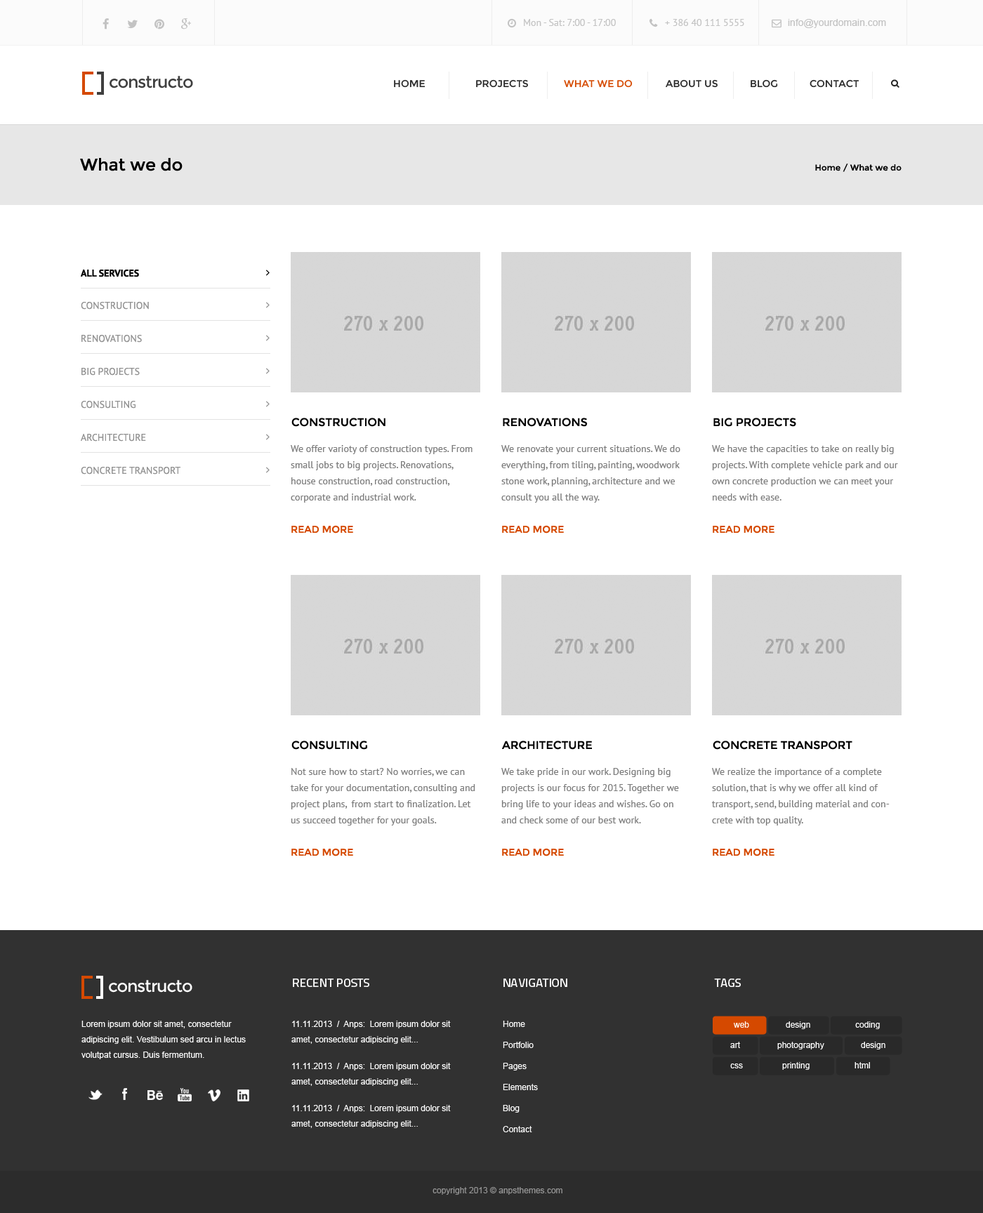
<style>
.page{position:relative;width:983px;height:1213px;background:#ffffff}
.page>*{position:absolute;margin:0}
.t1{font:9.8px "PTSans-Regular";color:#c3c3c3}
.t2{font:9.8px "ArialMT";color:#c3c3c3}
.t3{font:9.8px "Montserrat-Regular";color:#292929}
.t4{font:9.8px "Montserrat-Regular";color:#d54900}
.t5{font:16.8px "Montserrat-Regular";color:#000000}
.t6{font:8.4px "Montserrat-Regular";color:#000000}
.t7{font:9.8px "PTSans-Bold";color:#000000}
.t8{font:9.8px "PTSans-Regular";color:#919191}
.t9{font:11.2px "Montserrat-Regular";color:#000000}
.t10{font:9.8px/16.1px "PTSans-Regular";color:#7c7c7c}
.t11{font:11.9px "TitilliumText22L-Medium";color:#ffffff}
.t12{font:8.4px/15.4px "ArialMT";color:#ffffff}
.t13{font:8.4px/21.1px "ArialMT";color:#ffffff}
.t14{font:8.4px "ArialMT";color:#ffffff}
.t15{font:8.4px "ArialMT";color:#969696}
</style>
<div class="page">
<p class="t1" style="left:524px;top:19px;width:92px;height:7px">Mon - Sat: 7:00 - 17:00</p>
<p class="t1" style="left:665px;top:19px;width:79px;height:7px">+ 386 40 111 5555</p>
<p class="t2" style="left:788px;top:19px;width:98px;height:9px">info@yourdomain.com</p>
<p class="t3" style="left:394px;top:79px;width:31px;height:9px">HOME</p>
<p class="t3" style="left:476px;top:79px;width:52px;height:9px">PROJECTS</p>
<p class="t4" style="left:564px;top:79px;width:69px;height:9px">WHAT WE DO</p>
<p class="t3" style="left:666px;top:79px;width:52px;height:9px">ABOUT US</p>
<p class="t3" style="left:751px;top:79px;width:27px;height:9px">BLOG</p>
<p class="t3" style="left:809px;top:79px;width:50px;height:9px">CONTACT</p>
<p class="t5" style="left:80px;top:158px;width:103px;height:13px">What we do</p>
<p class="t6" style="left:815px;top:164px;width:86px;height:8px">Home / What we do</p>
<p class="t7" style="left:81px;top:270px;width:58px;height:7px">ALL SERVICES</p>
<p class="t8" style="left:81px;top:302px;width:68px;height:8px">CONSTRUCTION</p>
<p class="t8" style="left:81px;top:335px;width:61px;height:8px">RENOVATIONS</p>
<p class="t8" style="left:81px;top:368px;width:59px;height:8px">BIG PROJECTS</p>
<p class="t8" style="left:81px;top:401px;width:54px;height:8px">CONSULTING</p>
<p class="t9" style="left:291px;top:418px;width:94px;height:9px">CONSTRUCTION</p>
<p class="t9" style="left:503px;top:418px;width:85px;height:9px">RENOVATIONS</p>
<p class="t9" style="left:713px;top:418px;width:83px;height:9px">BIG PROJECTS</p>
<p class="t8" style="left:81px;top:434px;width:65px;height:8px">ARCHITECTURE</p>
<p class="t10" style="left:291px;top:445px;width:181px;height:58px">We offer varioty of construction types. From small jobs to big projects. Renovations, house construction, road construction, <br>corporate and industrial work.</p>
<p class="t10" style="left:501px;top:445px;width:179px;height:58px">We renovate your current situations. We do everything, from tiling, painting, woodwork stone work, planning, architecture and we consult you all the way.</p>
<p class="t10" style="left:712px;top:445px;width:186px;height:56px">We have the capacities to take on really big projects. With complete vehicle park and our own concrete production we can meet your needs with ease.</p>
<p class="t8" style="left:81px;top:467px;width:99px;height:8px">CONCRETE TRANSPORT</p>
<p class="t4" style="left:291px;top:525px;width:62px;height:9px">READ MORE</p>
<p class="t4" style="left:502px;top:525px;width:62px;height:9px">READ MORE</p>
<p class="t4" style="left:713px;top:525px;width:61px;height:9px">READ MORE</p>
<p class="t9" style="left:291px;top:741px;width:76px;height:9px">CONSULTING</p>
<p class="t9" style="left:502px;top:741px;width:90px;height:9px">ARCHITECTURE</p>
<p class="t9" style="left:713px;top:741px;width:139px;height:9px">CONCRETE TRANSPORT</p>
<p class="t10" style="left:291px;top:768px;width:184px;height:58px">Not sure how to start? No worries, we can take for your documentation, consulting and project plans,  from start to finalization. Let us succeed together for your goals.</p>
<p class="t10" style="left:501px;top:768px;width:178px;height:56px">We take pride in our work. Designing big projects is our focus for 2015. Together we bring life to your ideas and wishes. Go on and check some of our best work.</p>
<p class="t10" style="left:712px;top:768px;width:178px;height:58px">We realize the importance of a complete solution, that is why we offer all kind of transport, send, building material and concrete with top quality.</p>
<p class="t4" style="left:291px;top:848px;width:62px;height:9px">READ MORE</p>
<p class="t4" style="left:502px;top:848px;width:62px;height:9px">READ MORE</p>
<p class="t4" style="left:713px;top:848px;width:61px;height:9px">READ MORE</p>
<p class="t11" style="left:293px;top:979px;width:76px;height:8px">RECENT POSTS</p>
<p class="t11" style="left:503px;top:979px;width:64px;height:8px">NAVIGATION</p>
<p class="t11" style="left:714px;top:979px;width:27px;height:8px">TAGS</p>
<p class="t12" style="left:81px;top:1021px;width:165px;height:38px">Lorem ipsum dolor sit amet, consectetur <br>adipiscing elit. Vestibulum sed arcu in lectus volutpat cursus. Duis fermentum.</p>
<p class="t12" style="left:291px;top:1021px;width:160px;height:23px">11.11.2013  /  Anps:  Lorem ipsum dolor sit amet, consectetur adipiscing elit...</p>
<p class="t13" style="left:503px;top:1021px;width:35px;height:111px">Home<br>Portfolio<br>Pages<br>Elements<br>Blog<br>Contact</p>
<p class="t14" style="left:734px;top:1022px;width:15px;height:6px">web</p>
<p class="t14" style="left:786px;top:1022px;width:24px;height:7px">design</p>
<p class="t14" style="left:855px;top:1022px;width:25px;height:7px">coding</p>
<p class="t14" style="left:730px;top:1042px;width:10px;height:6px">art</p>
<p class="t14" style="left:777px;top:1042px;width:47px;height:8px">photography</p>
<p class="t14" style="left:861px;top:1042px;width:24px;height:8px">design</p>
<p class="t12" style="left:291px;top:1063px;width:160px;height:23px">11.11.2013  /  Anps:  Lorem ipsum dolor sit amet, consectetur adipiscing elit...</p>
<p class="t14" style="left:730px;top:1064px;width:13px;height:5px">css</p>
<p class="t14" style="left:782px;top:1062px;width:27px;height:8px">printing</p>
<p class="t14" style="left:854px;top:1062px;width:16px;height:7px">html</p>
<p class="t12" style="left:291px;top:1105px;width:160px;height:23px">11.11.2013  /  Anps:  Lorem ipsum dolor sit amet, consectetur adipiscing elit...</p>
<p class="t15" style="left:432px;top:1187px;width:130px;height:8px">copyright 2013 © anpsthemes.com</p>
</div>
